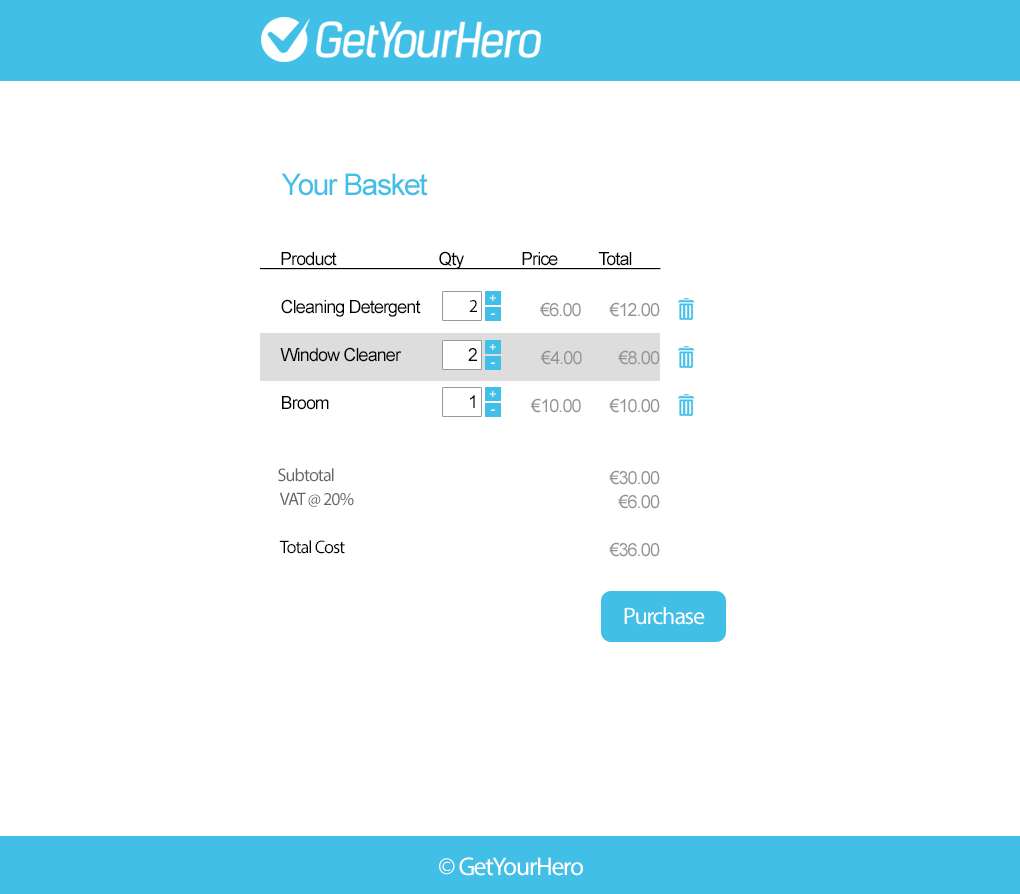
<style>
.page{position:relative;width:1020px;height:894px;background:#ffffff}
.page>*{position:absolute;margin:0}
.t1{font:30px "ArialMT";letter-spacing:-0.05em;color:#42bfe6}
.t2{font:18px/48px "ArialMT";letter-spacing:-0.05em;color:#000000;text-decoration:underline}
.t3{font:18px/48px "MyriadPro-Regular";letter-spacing:-0.05em;color:#000000;text-decoration:underline}
.t4{font:18px/48px "ArialMT";letter-spacing:-0.05em;color:#000000}
.t5{font:18px/24px "MyriadPro-Regular";letter-spacing:-0.05em;color:#666666}
.t6{font:18px/48px "MyriadPro-Regular";letter-spacing:-0.05em;color:#000000}
.t7{font:18px "MyriadPro-Regular";letter-spacing:-0.05em;color:#000000}
.t8{font:14px "DroidSerif-Bold";letter-spacing:-0.05em;color:#ffffff}
.t9{font:18px/48px "ArialMT";letter-spacing:-0.05em;color:#939394}
.t10{font:18px/24px "ArialMT";letter-spacing:-0.05em;color:#939394}
.t11{font:18px "ArialMT";letter-spacing:-0.05em;color:#000000}
.t12{font:24px "MyriadPro-Regular";letter-spacing:-0.05em;color:#ffffff}
.t13{font:25.8px "MyriadPro-Regular";letter-spacing:-0.05em;color:#ffffff}
</style>
<div class="page">
<p class="t1" style="left:281px;top:173px;width:147px;height:23px">Your Basket</p>
<p class="t2" style="left:260px;top:251px;width:401px;height:303px"><span class="t3">    </span>  Product                         Qty              Price          Total       <br><span class="t4">     Cleaning Detergent<br>     Window Cleaner<br>     Broom<br><br></span><span class="t5">      Subtotal<br>       VAT @ 20%<br></span><span class="t6">       Total Cost</span></p>
<p class="t7" style="left:469px;top:300px;width:8px;height:12px">2</p>
<p class="t8" style="left:489px;top:295px;width:7px;height:6px">+</p>
<p class="t9" style="left:530px;top:302px;width:130px;height:255px;text-align:right">€6.00       €12.00<br>  €4.00         €8.00<br>€10.00       €10.00<br><br><span class="t10">€30.00<br>€6.00<br></span>€36.00</p>
<p class="t8" style="left:491px;top:313px;width:4px;height:2px">-</p>
<p class="t11" style="left:468px;top:348px;width:9px;height:13px">2</p>
<p class="t8" style="left:489px;top:344px;width:7px;height:6px">+</p>
<p class="t8" style="left:491px;top:362px;width:4px;height:2px">-</p>
<p class="t11" style="left:470px;top:395px;width:5px;height:13px">1</p>
<p class="t8" style="left:489px;top:391px;width:7px;height:6px">+</p>
<p class="t8" style="left:491px;top:409px;width:4px;height:2px">-</p>
<p class="t12" style="left:624px;top:607px;width:81px;height:18px">Purchase</p>
<p class="t13" style="left:439px;top:857px;width:144px;height:19px">© GetYourHero</p>
</div>
